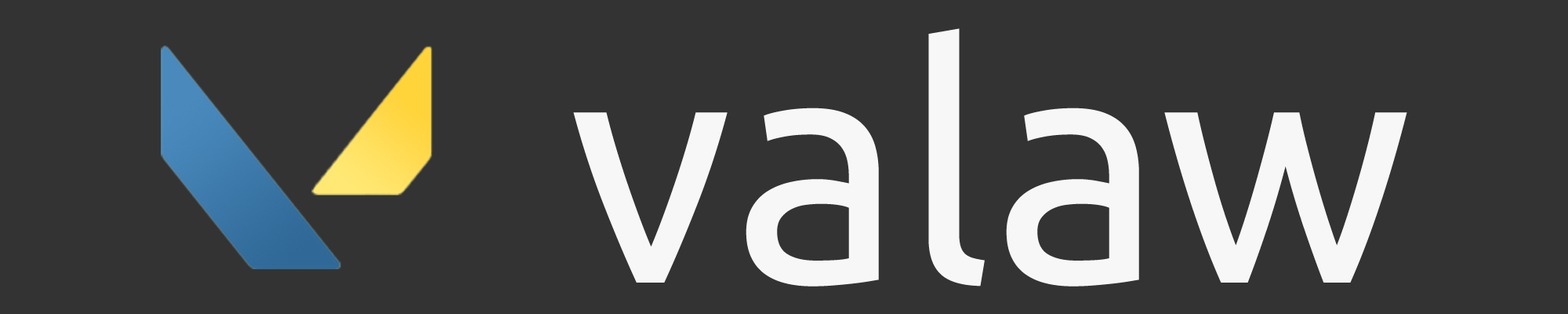
<style>
.page{position:relative;width:1568px;height:314px;background:#333333}
.page>*{position:absolute;margin:0}
.t1{font:326.7px "Ubuntu";color:#f7f7f7}
</style>
<div class="page">
<p class="t1" style="left:573px;top:28px;width:834px;height:258px">valaw</p>
</div>
